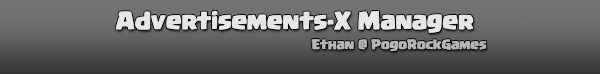
<style>
.page{position:relative;width:600px;height:74px}
.page>*{position:absolute;margin:0}
.t1{font:18px "CCBackBeat";color:#e6e6e6}
.t2{font:10px "CCBackBeat";color:#b5b5b5}
</style>
<div class="page">
<p class="t1" style="left:115px;top:10px;width:359px;height:23px">Advertisements-X Manager</p>
<p class="t2" style="left:311px;top:39px;width:176px;height:13px">Ethan @ PogoRockGames</p>
</div>
